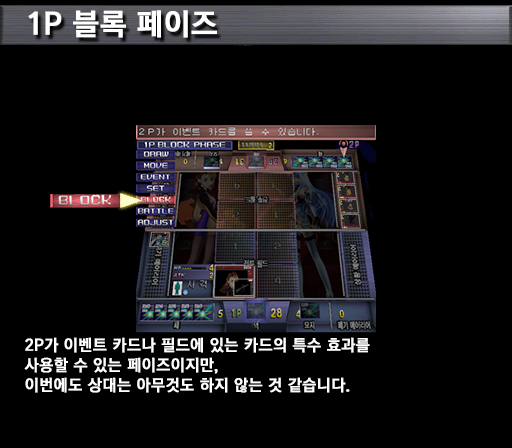
<style>
.page{position:relative;width:512px;height:448px;background:#000000}
.page>*{position:absolute;margin:0}
.t1{font:30px "KoreanGD15-R";color:#ffffff;font-weight:bold}
.t2{font:16px/20px "KoreanGD15-R";color:#ffffff;font-weight:bold}
</style>
<div class="page">
<p class="t1" style="left:28px;top:10px;width:189px;height:28px">1P 블록 페이즈</p>
<p class="t2" style="left:24px;top:337px;width:346px;height:56px">2P가 이벤트 카드나 필드에 있는 카드의 특수 효과를<br>사용할 수 있는 페이즈이지만,<br>이번에도 상대는 아무것도 하지 않는 것 같습니다.</p>
</div>
